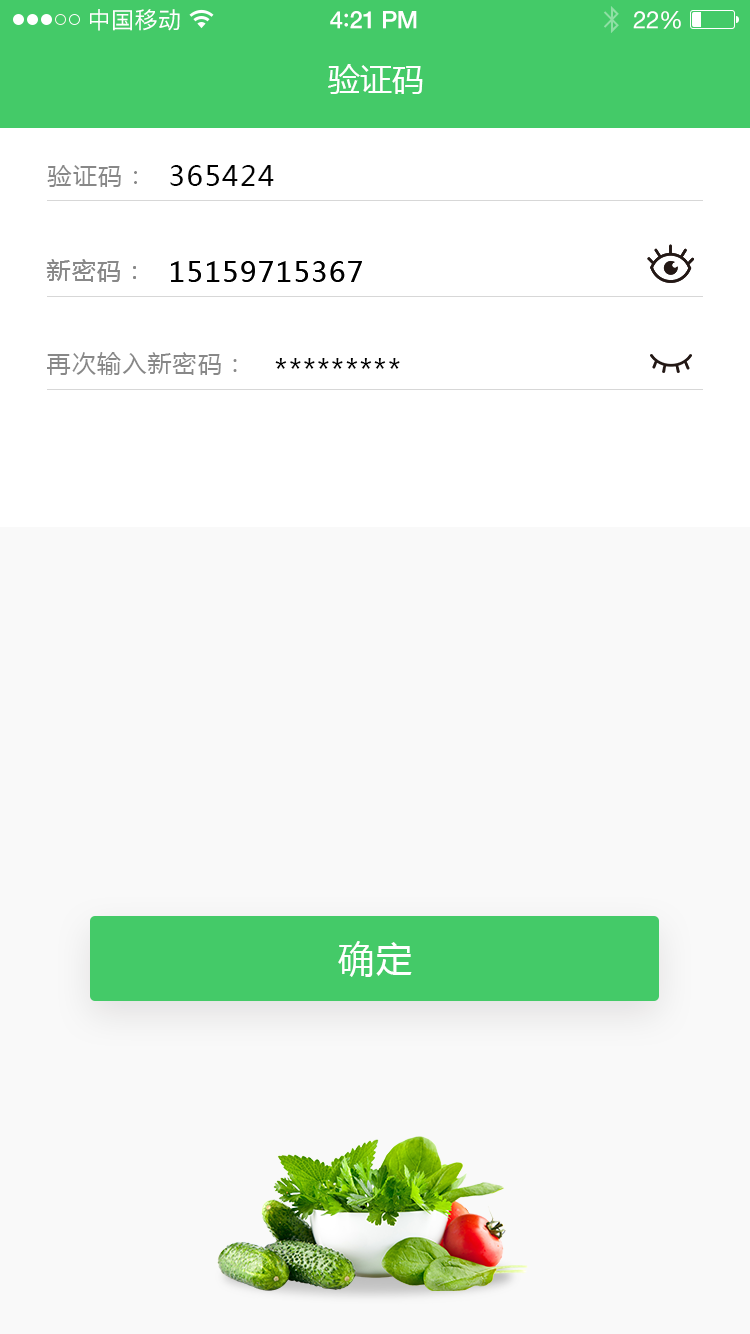
<style>
.page{position:relative;width:750px;height:1334px;background:#f9f9f9}
.page>*{position:absolute;margin:0}
.t1{font:23px "PingFangSC-Regular";letter-spacing:0.02em;color:#ffffff}
.t2{font:24px "HelveticaNeue-Medium";letter-spacing:-0.02em;color:#ffffff}
.t3{font:26px "Avenir-Medium";letter-spacing:-0.02em;color:#ffffff}
.t4{font:24px "HelveticaNeue";letter-spacing:-0.02em;color:#ffffff}
.t5{font:32px "MicrosoftYaHei";color:#ffffff;text-transform:uppercase}
.t6{font:24px "MicrosoftYaHei";letter-spacing:0.05em;color:#888888;text-transform:uppercase}
.t7{font:28px "MicrosoftYaHei";letter-spacing:0.05em;color:#010101;text-transform:uppercase}
.t8{font:36px "MicrosoftYaHei";letter-spacing:0.06em;color:#ffffff;text-transform:uppercase}
</style>
<div class="page">
<p class="t1" style="left:90px;top:9px;width:90px;height:22px">中国移动</p>
<p class="t2" style="left:330px;top:11px;width:87px;height:18px">4<span class="t3">:</span>21 PM</p>
<p class="t4" style="left:633px;top:11px;width:48px;height:18px">22%</p>
<p class="t5" style="left:328px;top:64px;width:95px;height:30px">验证码</p>
<p class="t6" style="left:47px;top:165px;width:90px;height:22px">验证码：</p>
<p class="t7" style="left:170px;top:165px;width:104px;height:21px">365424</p>
<p class="t6" style="left:46px;top:259px;width:90px;height:23px">新密码：</p>
<p class="t6" style="left:46px;top:259px;width:90px;height:23px">新密码：</p>
<p class="t7" style="left:171px;top:261px;width:191px;height:21px">15159715367</p>
<p class="t7" style="left:171px;top:261px;width:191px;height:21px">15159715367</p>
<p class="t6" style="left:47px;top:352px;width:190px;height:23px">再次输入新密码：</p>
<p class="t7" style="left:275px;top:358px;width:125px;height:11px">*********</p>
<p class="t8" style="left:338px;top:941px;width:74px;height:36px">确定</p>
</div>
